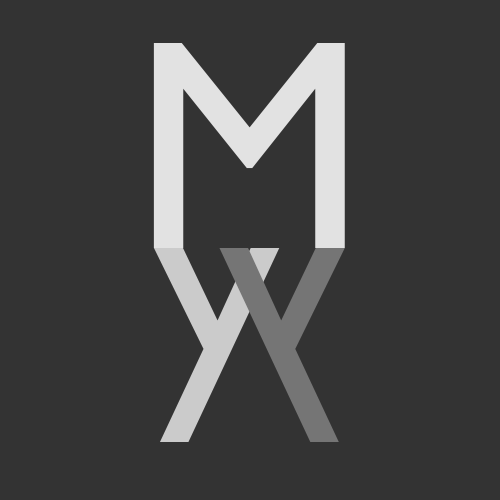
<style>
.page{position:relative;width:500px;height:500px;background:#333333}
.page>*{position:absolute;margin:0}
.t1{font:300px "GillSans";color:#e2e2e2}
.t2{font:286px "GillSans";color:#cbcbcb}
.t3{font:286px "GillSans";color:#757575}
</style>
<div class="page">
<p class="t1" style="left:153px;top:43px;width:192px;height:205px">M</p>
<p class="t2" style="left:154px;top:248px;width:126px;height:194px">y</p>
<p class="t3" style="left:219px;top:248px;width:126px;height:194px;rotate:180deg">y</p>
</div>
